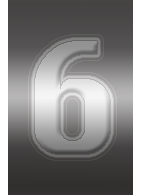
<style>
.page{position:relative;width:142px;height:195px}
.page>*{position:absolute;margin:0}
.t1{font:150px "Krungthep"}
</style>
<div class="page">
<p class="t1" style="left:35px;top:41px;width:75px;height:113px">6</p>
</div>
